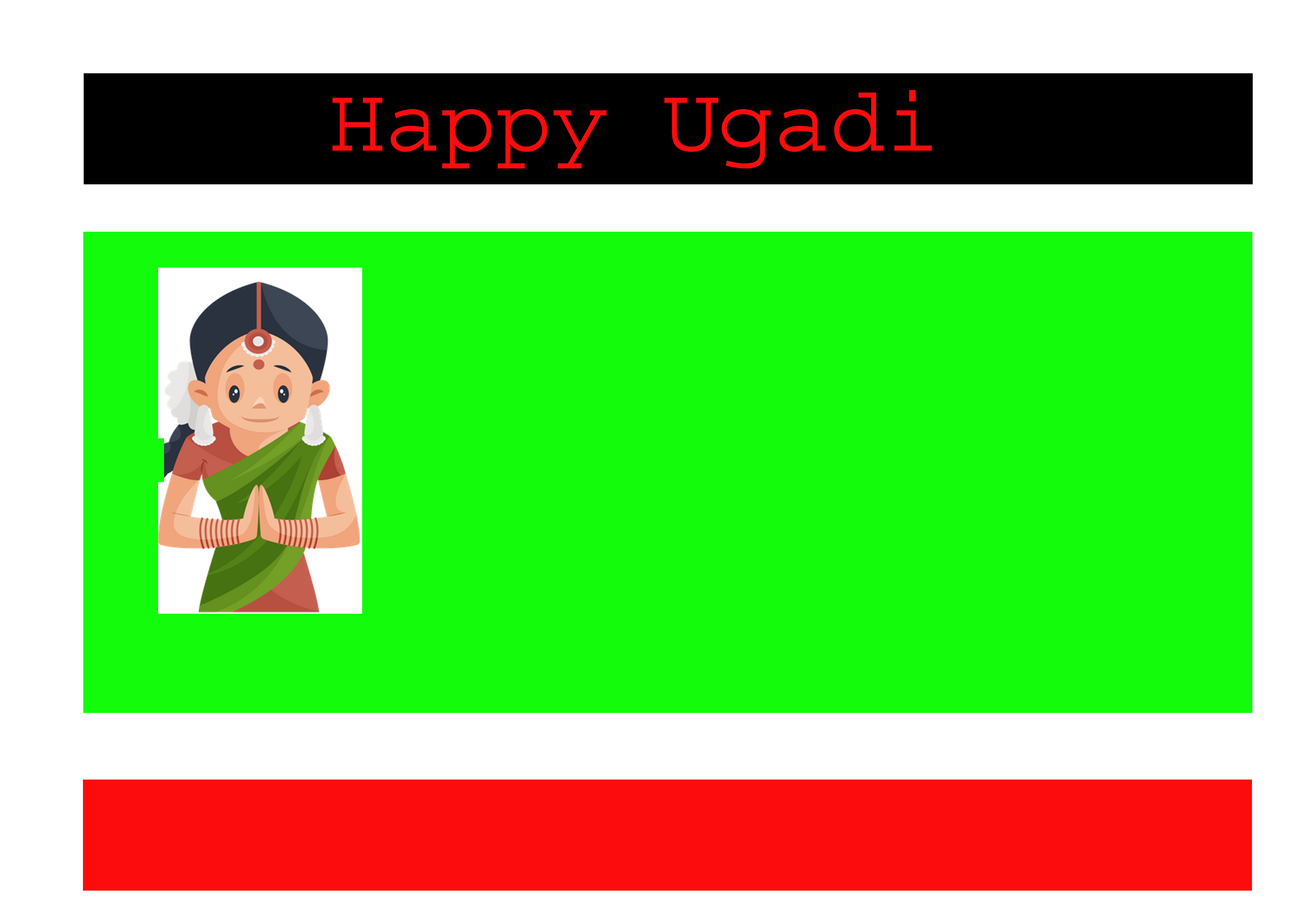
<style>
.page{position:relative;width:1299px;height:918px;background:#12fc0c}
.page>*{position:absolute;margin:0}
.t1{font:92.6px "Courier";color:#fc0c0c}
</style>
<div class="page">
<p class="t1" style="left:332px;top:90px;width:600px;height:78px">Happy Ugadi</p>
</div>
